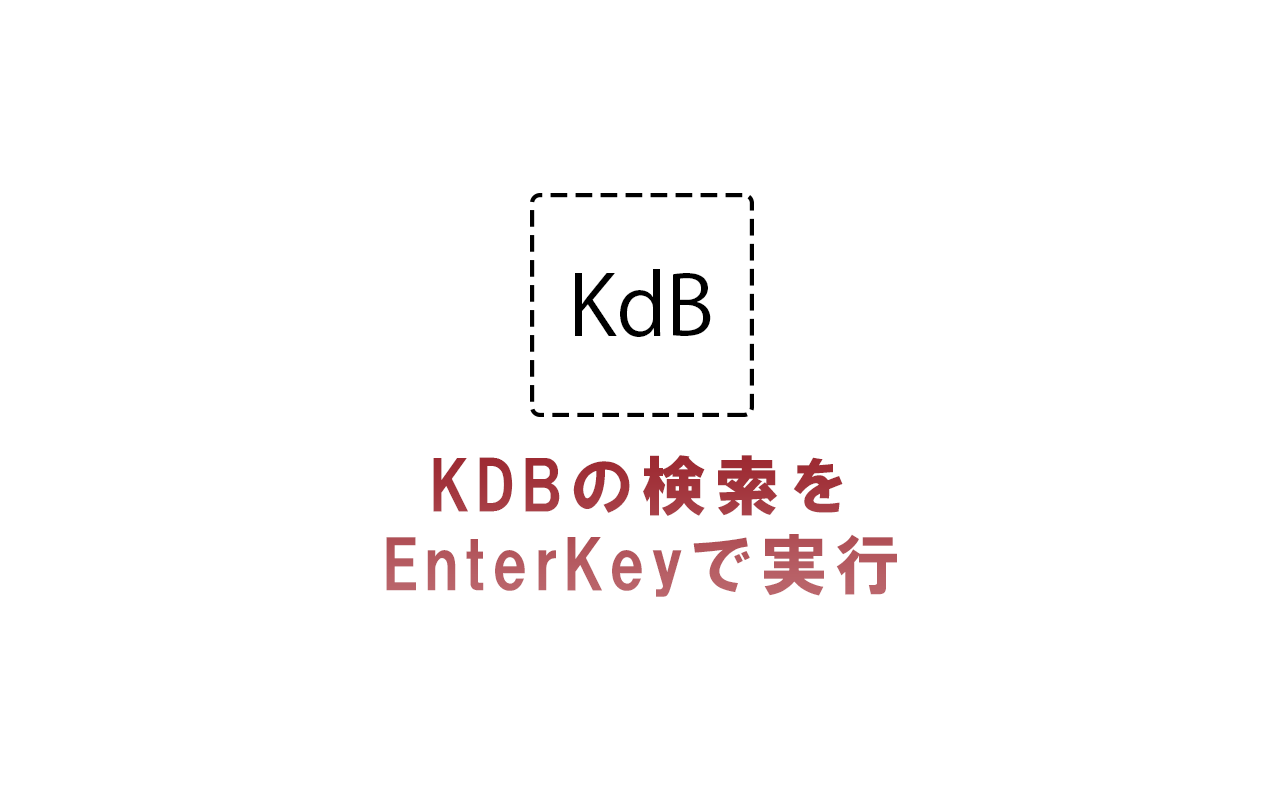
<style>
.page{position:relative;width:1280px;height:800px;background:#ffffff}
.page>*{position:absolute;margin:0}
.t1{font:83.3px "KozGoPr6N-Regular";color:#000000}
.t2{font:66px "HGSSoeiKakugothicUB";letter-spacing:0.1em}
</style>
<div class="page">
<p class="t1" style="left:575px;top:269px;width:136px;height:68px">KdB</p>
<p class="t2" style="left:386px;top:455px;width:511px;height:142px;text-align:center">KDBの検索を<br>EnterKeyで実行</p>
</div>
